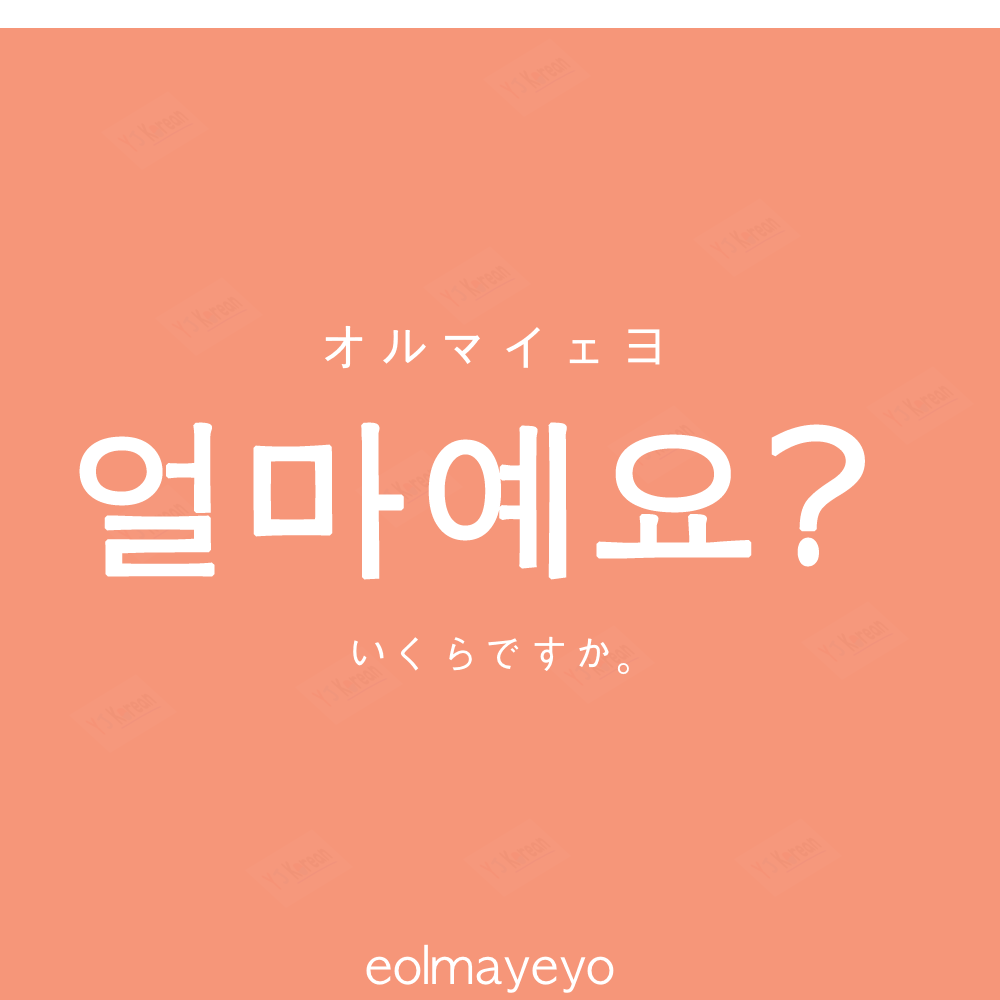
<style>
.page{position:relative;width:1000px;height:1000px;background:#f69679}
.page>*{position:absolute;margin:0}
.t1{font:60px "AppleGothic";color:#ffffff}
.t2{font:170px "AppleGothic";color:#ffffff;font-weight:bold}
.t3{font:45px "AppleGothic";color:#ffffff}
.t4{font:50px "AppleGothic";color:#ffffff}
</style>
<div class="page">
<p class="t1" style="left:325px;top:325px;width:335px;height:44px">オルマイェヨ</p>
<p class="t2" style="left:79px;top:422px;width:786px;height:158px">얼마예요?</p>
<p class="t3" style="left:353px;top:636px;width:276px;height:39px">いくらですか。</p>
<p class="t4" style="left:366px;top:944px;width:248px;height:49px">eolmayeyo</p>
</div>
